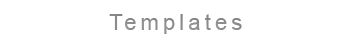
<style>
.page{position:relative;width:350px;height:50px;background:#ffffff}
.page>*{position:absolute;margin:0}
.t1{font:21.6px "ArialMT";letter-spacing:0.2em;color:#8c8c8c}
</style>
<div class="page">
<p class="t1" style="left:109px;top:14px;width:133px;height:20px">Templates</p>
</div>
